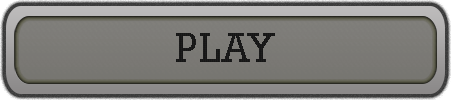
<style>
.page{position:relative;width:451px;height:100px}
.page>*{position:absolute;margin:0}
.t1{font:41.7px "Rockwell";color:#1a1a1a}
</style>
<div class="page">
<p class="t1" style="left:176px;top:33px;width:99px;height:29px">PLAY</p>
</div>
